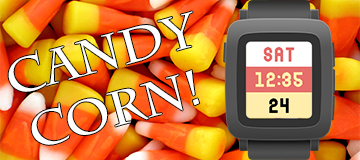
<style>
.page{position:relative;width:360px;height:160px}
.page>*{position:absolute;margin:0}
.t1{font:48px "CharlemagneStd-Bold";color:#ffffff}
</style>
<div class="page">
<p class="t1" style="left:8px;top:11px;width:192px;height:134px;rotate:-15deg">CANDY CORN!</p>
</div>
